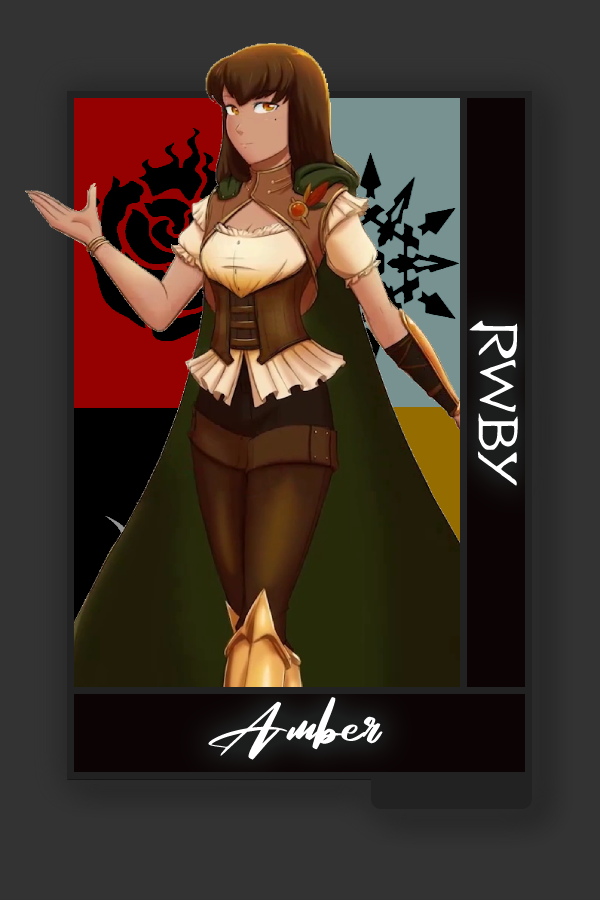
<style>
.page{position:relative;width:600px;height:900px;background:#333333}
.page>*{position:absolute;margin:0}
.t1{font:61.3px "RWBY_Style";color:#ffffff;scale:1.25 1}
.t2{font:75px "RosegaFREE";color:#ffffff}
</style>
<div class="page">
<p class="t1" style="left:469px;top:320px;width:49px;height:166px;rotate:90deg">RWBY</p>
<p class="t2" style="left:207px;top:696px;width:176px;height:64px">Amber</p>
</div>
